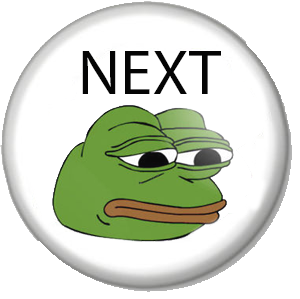
<style>
.page{position:relative;width:300px;height:299px;background:#ffffff}
.page>*{position:absolute;margin:0}
.t1{font:64px "MyriadPro-Regular";color:#050505}
</style>
<div class="page">
<p class="t1" style="left:82px;top:51px;width:139px;height:43px">NEXT</p>
</div>
